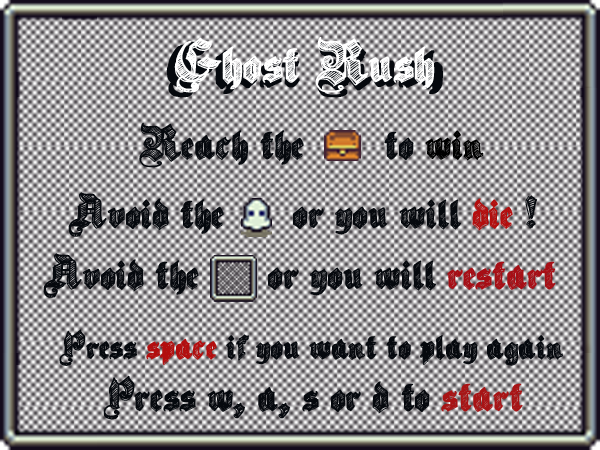
<style>
.page{position:relative;width:600px;height:450px}
.page>*{position:absolute;margin:0}
.t1{font:60px "SketchGothicSchool";letter-spacing:-0.01em;color:#ffffff}
.t2{font:48px "SketchGothicSchool";letter-spacing:-0.01em;color:#06090e}
.t3{font:48px "SketchGothicSchool";letter-spacing:-0.01em;color:#000000}
.t4{font:48px "SketchGothicSchool";letter-spacing:-0.01em;color:#b30e0e}
.t5{font:48px "SketchGothicSchool";letter-spacing:-0.01em;color:#a70e15}
.t6{font:40px "SketchGothicSchool";letter-spacing:-0.01em;color:#06090e}
.t7{font:40px "SketchGothicSchool";letter-spacing:-0.01em;color:#b30e0e}
.t8{font:48px "SketchGothicSchool";letter-spacing:-0.01em;color:#a81415}
</style>
<div class="page">
<p class="t1" style="left:174px;top:37px;width:261px;height:56px">Ghost Rush</p>
<p class="t2" style="left:139px;top:122px;width:345px;height:46px">Reach the       to <span class="t3">win</span></p>
<p class="t2" style="left:68px;top:192px;width:470px;height:45px">Avoid the      or you will <span class="t4">die</span> !</p>
<p class="t2" style="left:43px;top:253px;width:513px;height:45px">Avoid the      or you will <span class="t5">restart</span></p>
<p class="t6" style="left:59px;top:329px;width:504px;height:37px">Press <span class="t7">space </span>if you want to play again</p>
<p class="t2" style="left:103px;top:375px;width:420px;height:45px">Press w, a, s or d to <span class="t8">start</span></p>
</div>
